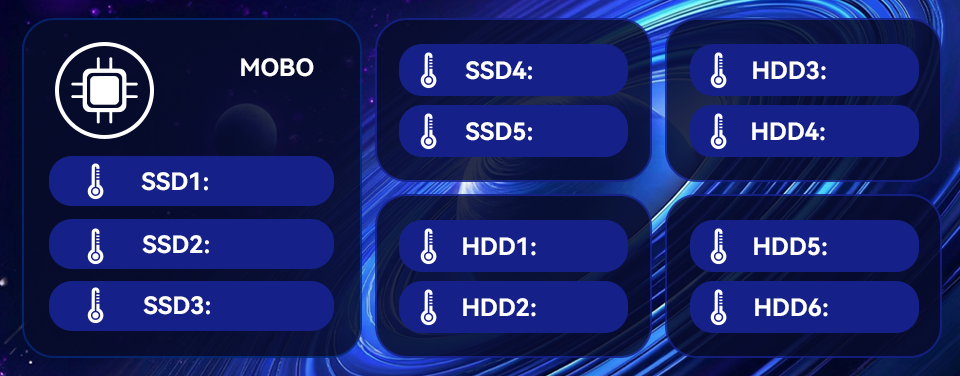
<style>
.page{position:relative;width:960px;height:376px;background:#152089}
.page>*{position:absolute;margin:0}
.t1{font:24px "HarmonyOS_Sans_SC_Bold";color:#ffffff}
</style>
<div class="page">
<p class="t1" style="left:241px;top:58px;width:73px;height:19px">MOBO</p>
<p class="t1" style="left:465px;top:61px;width:67px;height:19px">SSD4:</p>
<p class="t1" style="left:753px;top:61px;width:73px;height:19px">HDD3:</p>
<p class="t1" style="left:465px;top:122px;width:67px;height:19px">SSD5:</p>
<p class="t1" style="left:752px;top:122px;width:73px;height:19px">HDD4:</p>
<p class="t1" style="left:141px;top:172px;width:67px;height:19px">SSD1:</p>
<p class="t1" style="left:142px;top:235px;width:67px;height:19px">SSD2:</p>
<p class="t1" style="left:463px;top:237px;width:73px;height:19px">HDD1:</p>
<p class="t1" style="left:754px;top:237px;width:73px;height:19px">HDD5:</p>
<p class="t1" style="left:143px;top:296px;width:67px;height:19px">SSD3:</p>
<p class="t1" style="left:463px;top:298px;width:73px;height:19px">HDD2:</p>
<p class="t1" style="left:755px;top:298px;width:73px;height:19px">HDD6:</p>
</div>
